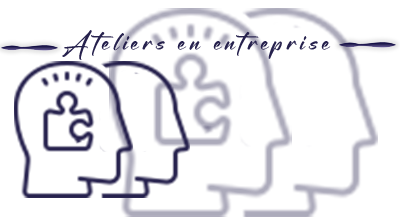
<style>
.page{position:relative;width:400px;height:224px;background:#ffffff}
.page>*{position:absolute;margin:0}
.t1{font:30px "Blacklist";letter-spacing:0.13em;color:#26214d}
</style>
<div class="page">
<p class="t1" style="left:62px;top:30px;width:269px;height:30px">Ateliers en entreprise</p>
</div>
